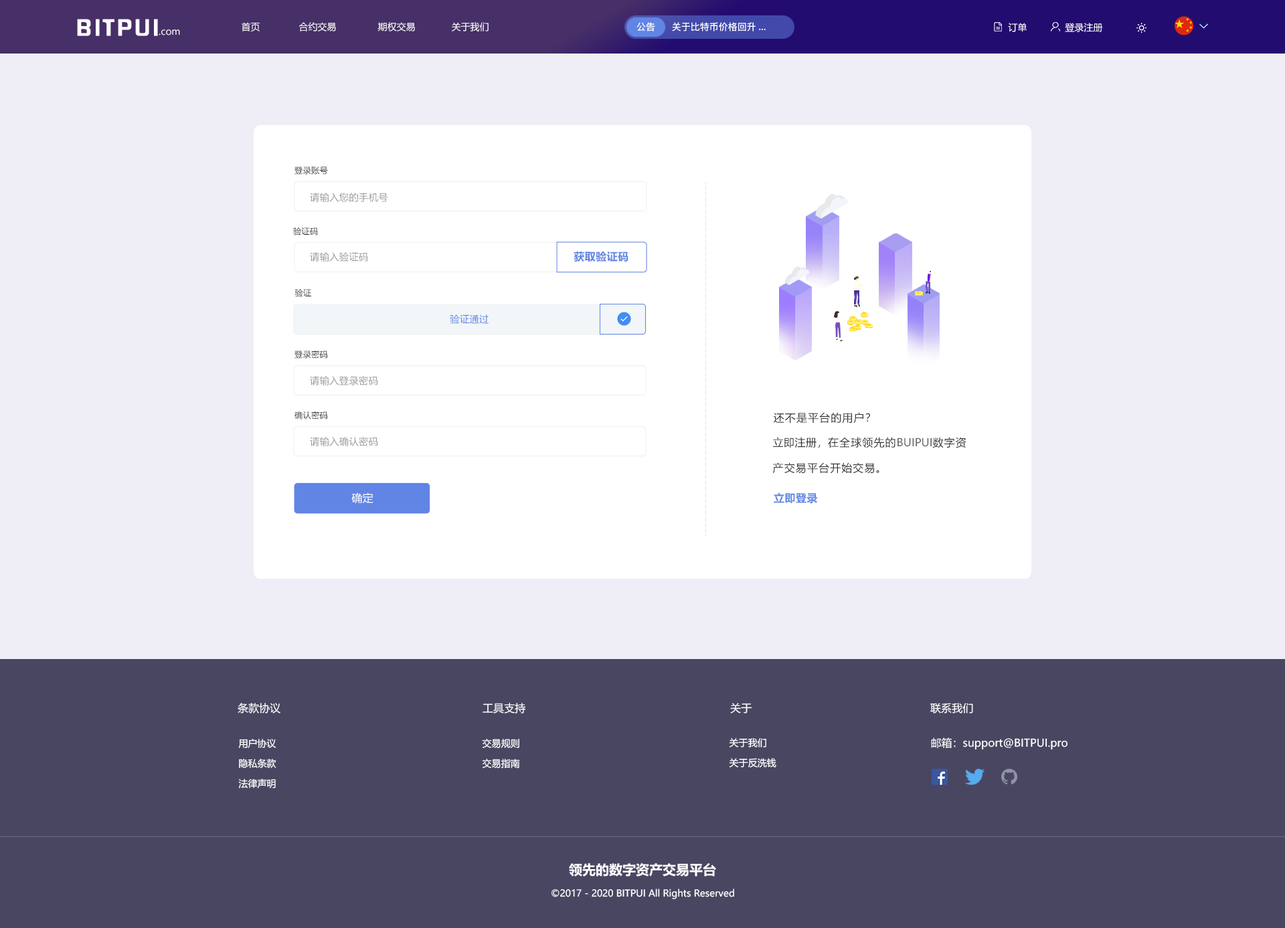
<style>
.page{position:relative;width:1285px;height:928px;background:#efeef7}
.page>*{position:absolute;margin:0}
.t1{font:20.5px "FZHZGBJW--GB1-0";letter-spacing:0.1em;color:#ffffff;scale:1.14 1}
.t2{font:9.4px "MicrosoftYaHei";color:#ffffff}
.t3{font:9.4px "PingFang-SC-Bold";color:#ffffff}
.t4{font:8.1px "MicrosoftYaHei";letter-spacing:0.03em;color:#333333}
.t5{font:9.5px "MicrosoftYaHei";letter-spacing:0.03em;color:#999999}
.t6{font:10.7px "MicrosoftYaHei-Bold";letter-spacing:0.03em;color:#6185e5}
.t7{font:9.5px "MicrosoftYaHei";letter-spacing:0.03em;color:#6185e5}
.t8{font:10.7px "MicrosoftYaHei";letter-spacing:0.07em;color:#333333}
.t9{font:10.7px/25.4px "MicrosoftYaHei";letter-spacing:0.07em;color:#333333}
.t10{font:10.7px/25.4px "MicrosoftYaHei";letter-spacing:0.03em;color:#333333}
.t11{font:10.8px/32.5px "MicrosoftYaHei";color:#666666}
.t12{font:10.7px "MicrosoftYaHei";letter-spacing:0.03em;color:#ffffff}
.t13{font:10.7px "MicrosoftYaHei";color:#ffffff}
.t14{font:9.4px/20.1px "MicrosoftYaHei";color:#ffffff}
.t15{font:13.4px "MicrosoftYaHei-Bold";color:#ffffff}
</style>
<div class="page">
<p class="t1" style="left:77px;top:19px;width:81px;height:17px">BITPUI</p>
<p class="t2" style="left:159px;top:29px;width:21px;height:6px">.com</p>
<p class="t2" style="left:242px;top:22px;width:246px;height:9px">首页              合约交易               期权交易             关于我们</p>
<p class="t3" style="left:636px;top:22px;width:19px;height:9px">公告</p>
<p class="t3" style="left:672px;top:22px;width:94px;height:9px">关于比特币价格回升...</p>
<p class="t2" style="left:1008px;top:23px;width:18px;height:9px">订单</p>
<p class="t2" style="left:1065px;top:23px;width:38px;height:9px">登录注册</p>
<p class="t4" style="left:294px;top:167px;width:34px;height:8px">登录账号</p>
<p class="t5" style="left:310px;top:193px;width:78px;height:9px">请输入您的手机号</p>
<p class="t4" style="left:293px;top:228px;width:25px;height:8px">验证码</p>
<p class="t5" style="left:310px;top:252px;width:58px;height:10px">请输入验证码</p>
<p class="t6" style="left:573px;top:251px;width:55px;height:11px">获取验证码</p>
<p class="t4" style="left:294px;top:289px;width:17px;height:8px">验证</p>
<p class="t7" style="left:450px;top:315px;width:38px;height:9px">验证通过</p>
<p class="t4" style="left:294px;top:350px;width:33px;height:9px">登录密码</p>
<p class="t5" style="left:310px;top:376px;width:68px;height:9px">请输入登录密码</p>
<p class="t4" style="left:294px;top:411px;width:33px;height:9px">确认密码</p>
<p class="t8" style="left:774px;top:412px;width:96px;height:12px">还不是平台的用户？</p>
<p class="t5" style="left:310px;top:437px;width:68px;height:9px">请输入确认密码</p>
<p class="t9" style="left:772px;top:437px;width:194px;height:37px"><span class="t10">立即注册，</span>在全球领先的<span class="t11">BUIPUI</span>数字资<br>产交易平台开始交易。</p>
<p class="t12" style="left:351px;top:492px;width:22px;height:12px">确定</p>
<p class="t6" style="left:774px;top:492px;width:44px;height:12px">立即登录</p>
<p class="t13" style="left:238px;top:703px;width:42px;height:10px">条款协议</p>
<p class="t13" style="left:482px;top:703px;width:43px;height:11px">工具支持</p>
<p class="t13" style="left:730px;top:703px;width:22px;height:10px">关于</p>
<p class="t13" style="left:930px;top:703px;width:43px;height:11px">联系我们</p>
<p class="t13" style="left:931px;top:737px;width:136px;height:13px">邮箱：support@BITPUI.pro</p>
<p class="t14" style="left:238px;top:739px;width:38px;height:49px;text-align:center">用户协议<br>隐私条款<br>法律声明</p>
<p class="t14" style="left:482px;top:739px;width:38px;height:29px">交易规则<br>交易指南</p>
<p class="t14" style="left:729px;top:738px;width:47px;height:30px">关于我们<br>关于反洗钱</p>
<p class="t15" style="left:569px;top:863px;width:147px;height:14px">领先的数字资产交易平台</p>
<p class="t2" style="left:551px;top:889px;width:183px;height:10px">©2017 - 2020 BITPUI All Rights Reserved</p>
</div>
